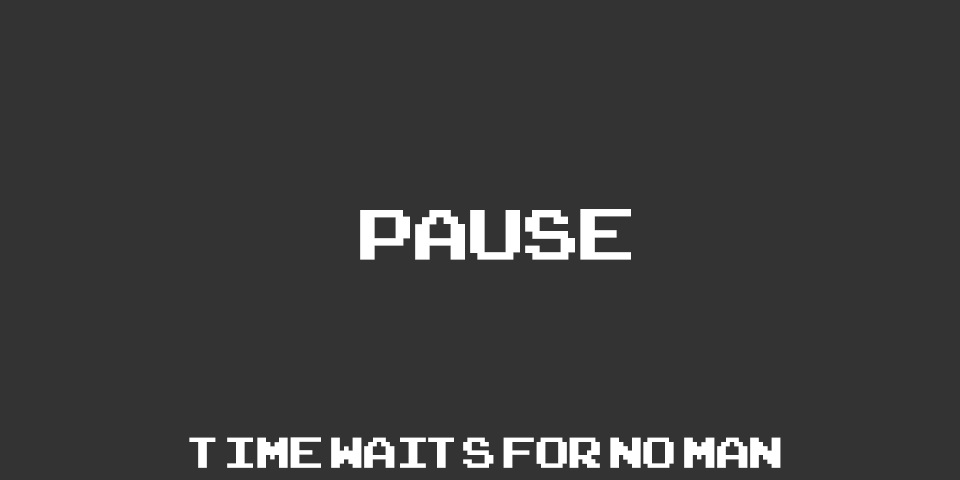
<style>
.page{position:relative;width:960px;height:480px;background:#333333}
.page>*{position:absolute;margin:0}
.t1{font:100px "ArcadeClassic";color:#ffffff}
.t2{font:60px "ArcadeClassic";color:#ffffff}
</style>
<div class="page">
<p class="t1" style="left:360px;top:209px;width:271px;height:51px">Pause</p>
<p class="t2" style="left:189px;top:437px;width:592px;height:31px">time waits for no man</p>
</div>
